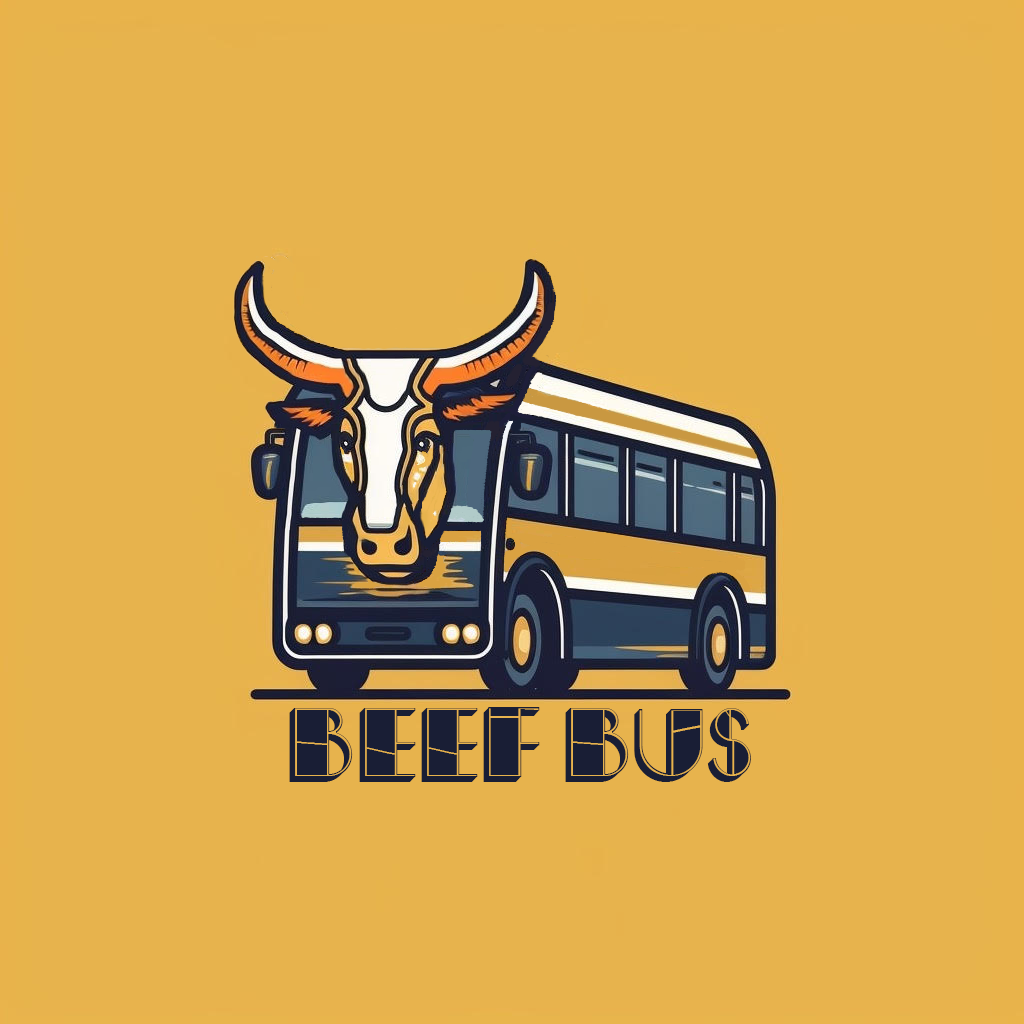
<style>
.page{position:relative;width:1024px;height:1024px;background:#e7b34d}
.page>*{position:absolute;margin:0}
.t1{font:100px "Beef-Regular";color:#191e35}
</style>
<div class="page">
<p class="t1" style="left:289px;top:707px;width:462px;height:75px">BEEF BUS</p>
</div>
